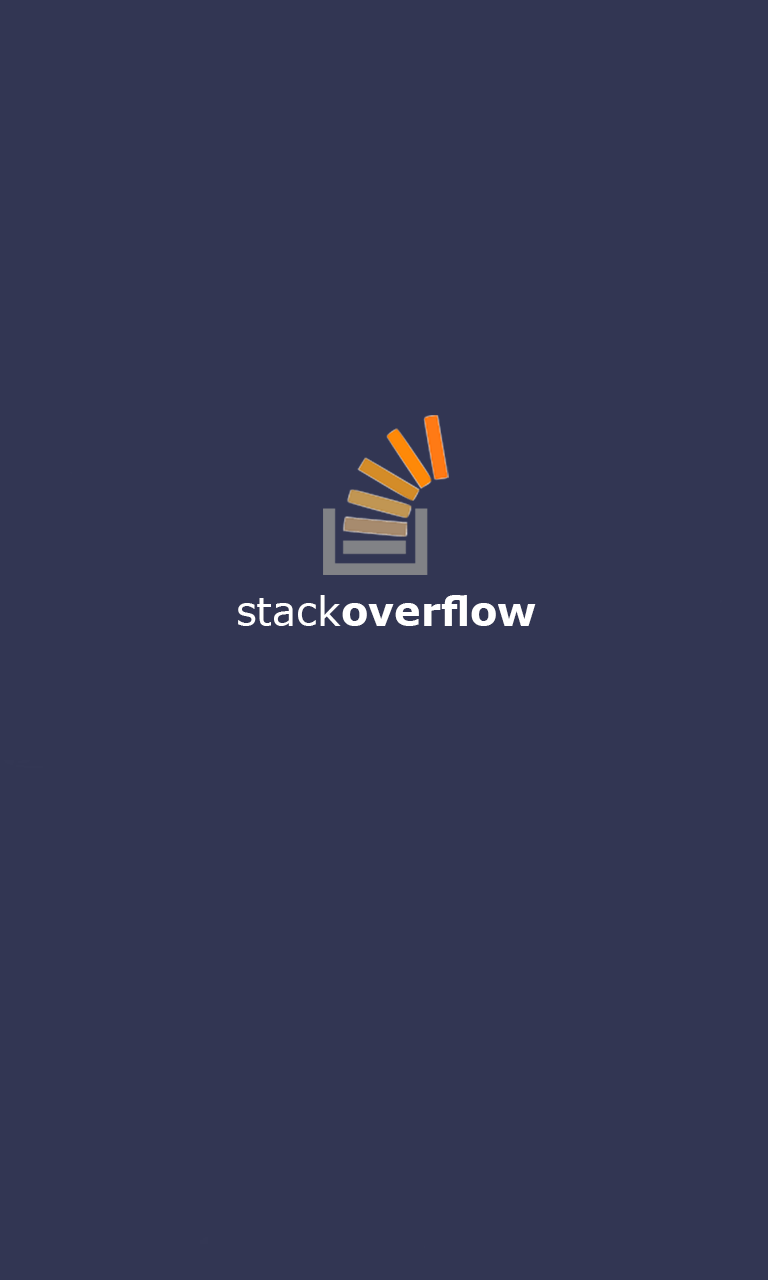
<style>
.page{position:relative;width:768px;height:1280px;background:#323653}
.page>*{position:absolute;margin:0}
.t1{font:40px "Verdana-Bold";color:#ffffff}
.t2{font:40px "Verdana";color:#ffffff}
</style>
<div class="page">
<p class="t1" style="left:238px;top:595px;width:298px;height:31px"><span class="t2">stack</span>overflow</p>
</div>
